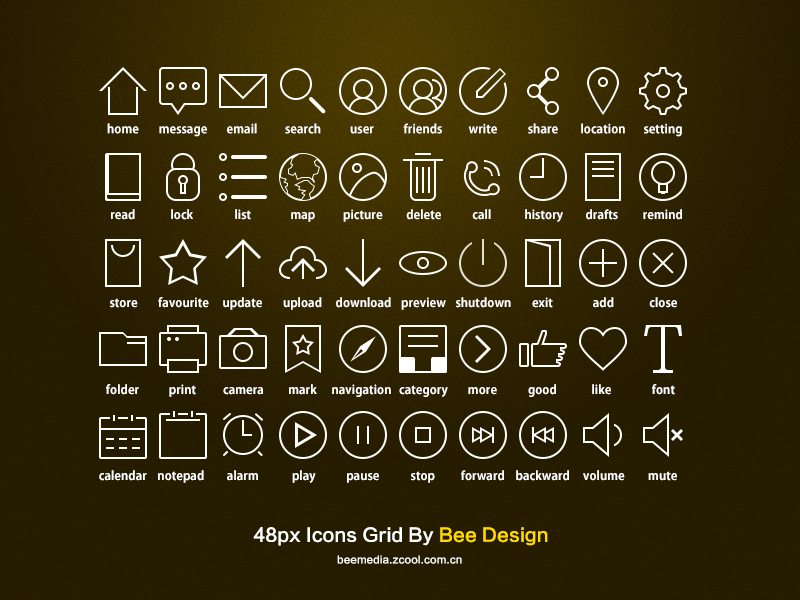
<style>
.page{position:relative;width:800px;height:600px}
.page>*{position:absolute;margin:0}
.t1{font:12px "KozGoPr6N-Bold";color:#ffffff}
.t2{font:12.1px "KozGoPr6N-Bold";color:#ffffff}
.t3{font:18px "FZLTCHK--GBK1-0";color:#ffffff}
.t4{font:18px "FZLTCHK--GBK1-0";color:#ffd900}
.t5{font:10px "FZLTCHK--GBK1-0";color:#ffffff}
</style>
<div class="page">
<p class="t1" style="left:107px;top:123px;width:32px;height:11px">home</p>
<p class="t1" style="left:159px;top:126px;width:48px;height:11px">message</p>
<p class="t1" style="left:227px;top:123px;width:30px;height:11px">email</p>
<p class="t1" style="left:285px;top:123px;width:36px;height:11px">search</p>
<p class="t1" style="left:350px;top:126px;width:24px;height:8px">user</p>
<p class="t1" style="left:403px;top:123px;width:39px;height:11px">friends</p>
<p class="t1" style="left:468px;top:123px;width:29px;height:11px">write</p>
<p class="t1" style="left:528px;top:123px;width:30px;height:11px">share</p>
<p class="t1" style="left:581px;top:123px;width:44px;height:11px">location</p>
<p class="t1" style="left:644px;top:123px;width:38px;height:14px">setting</p>
<p class="t1" style="left:111px;top:209px;width:24px;height:11px">read</p>
<p class="t1" style="left:171px;top:209px;width:22px;height:11px">lock</p>
<p class="t1" style="left:235px;top:209px;width:16px;height:11px">list</p>
<p class="t1" style="left:343px;top:209px;width:40px;height:13px">picture</p>
<p class="t1" style="left:406px;top:209px;width:35px;height:11px">delete</p>
<p class="t1" style="left:472px;top:209px;width:19px;height:11px">call</p>
<p class="t1" style="left:525px;top:209px;width:38px;height:13px">history</p>
<p class="t1" style="left:586px;top:209px;width:32px;height:11px">drafts</p>
<p class="t1" style="left:643px;top:209px;width:39px;height:11px">remind</p>
<p class="t1" style="left:291px;top:212px;width:24px;height:10px">map</p>
<p class="t2" style="left:110px;top:298px;width:28px;height:10px">store</p>
<p class="t2" style="left:158px;top:297px;width:51px;height:11px">favourite</p>
<p class="t2" style="left:223px;top:297px;width:39px;height:13px">update</p>
<p class="t2" style="left:283px;top:297px;width:39px;height:13px">upload</p>
<p class="t2" style="left:336px;top:297px;width:55px;height:11px">download</p>
<p class="t2" style="left:401px;top:297px;width:45px;height:13px">preview</p>
<p class="t2" style="left:456px;top:297px;width:55px;height:11px">shutdown</p>
<p class="t2" style="left:532px;top:297px;width:21px;height:11px">exit</p>
<p class="t2" style="left:593px;top:297px;width:21px;height:11px">add</p>
<p class="t2" style="left:649px;top:297px;width:28px;height:11px">close</p>
<p class="t2" style="left:106px;top:384px;width:33px;height:11px">folder</p>
<p class="t2" style="left:169px;top:384px;width:27px;height:13px">print</p>
<p class="t2" style="left:223px;top:387px;width:40px;height:8px">camera</p>
<p class="t2" style="left:289px;top:384px;width:28px;height:11px">mark</p>
<p class="t2" style="left:332px;top:384px;width:59px;height:13px">navigation</p>
<p class="t2" style="left:399px;top:385px;width:49px;height:12px">category</p>
<p class="t2" style="left:468px;top:387px;width:29px;height:8px">more</p>
<p class="t2" style="left:528px;top:384px;width:28px;height:13px">good</p>
<p class="t2" style="left:592px;top:384px;width:19px;height:11px">like</p>
<p class="t2" style="left:652px;top:384px;width:23px;height:11px">font</p>
<p class="t1" style="left:99px;top:470px;width:48px;height:11px">calendar</p>
<p class="t1" style="left:158px;top:470px;width:46px;height:13px">notepad</p>
<p class="t1" style="left:227px;top:470px;width:31px;height:11px">alarm</p>
<p class="t1" style="left:292px;top:470px;width:24px;height:13px">play</p>
<p class="t1" style="left:347px;top:473px;width:32px;height:10px">pause</p>
<p class="t1" style="left:411px;top:471px;width:24px;height:12px">stop</p>
<p class="t1" style="left:461px;top:470px;width:43px;height:11px">forward</p>
<p class="t1" style="left:516px;top:470px;width:53px;height:11px">backward</p>
<p class="t1" style="left:583px;top:470px;width:42px;height:11px">volume</p>
<p class="t1" style="left:648px;top:471px;width:29px;height:10px">mute</p>
<p class="t3" style="left:253px;top:527px;width:295px;height:19px">48px Icons Grid By <span class="t4">Bee Design</span></p>
<p class="t5" style="left:337px;top:555px;width:125px;height:9px">beemedia.zcool.com.cn</p>
</div>
